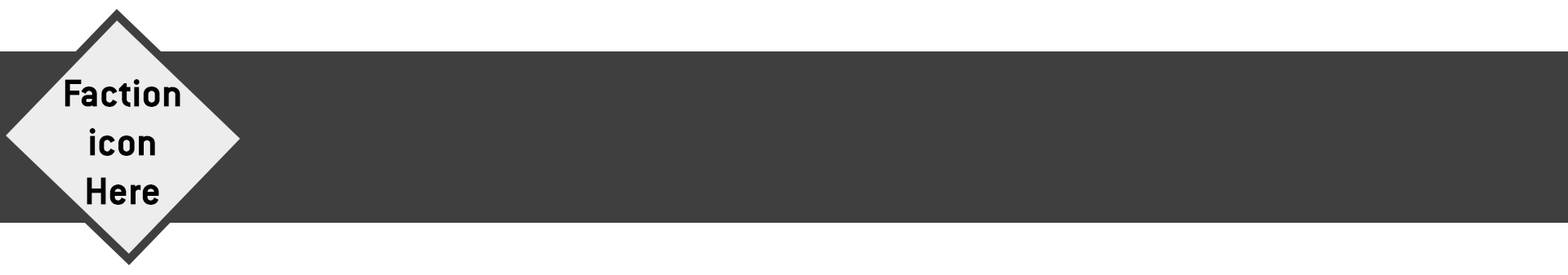
<style>
.page{position:relative;width:1568px;height:275px;background:#3f3f3f}
.page>*{position:absolute;margin:0}
.t1{font:42.9px "ConduitITC-Bold";color:#000000}
</style>
<div class="page">
<p class="t1" style="left:65px;top:79px;width:115px;height:126px;text-align:center">Faction<br>icon<br>Here</p>
</div>
